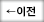
<style>
.page{position:relative;width:44px;height:22px;background:#ffffff}
.page>*{position:absolute;margin:0}
.t1{font:10px "YoonGothicPro770";color:#000000}
</style>
<div class="page">
<p class="t1" style="left:6px;top:6px;width:30px;height:11px">←이전</p>
</div>
